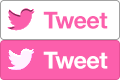
<style>
.page{position:relative;width:120px;height:80px;background:#ffffff}
.page>*{position:absolute;margin:0}
.t1{font:23.4px "HelveticaNeue-Bold";letter-spacing:-0.025em;color:#fc5fac}
.t2{font:23.4px "HelveticaNeue-Bold";letter-spacing:-0.025em;color:#fefefe}
</style>
<div class="page">
<p class="t1" style="left:43px;top:11px;width:65px;height:18px">Tweet</p>
<p class="t2" style="left:43px;top:51px;width:65px;height:18px">Tweet</p>
</div>
